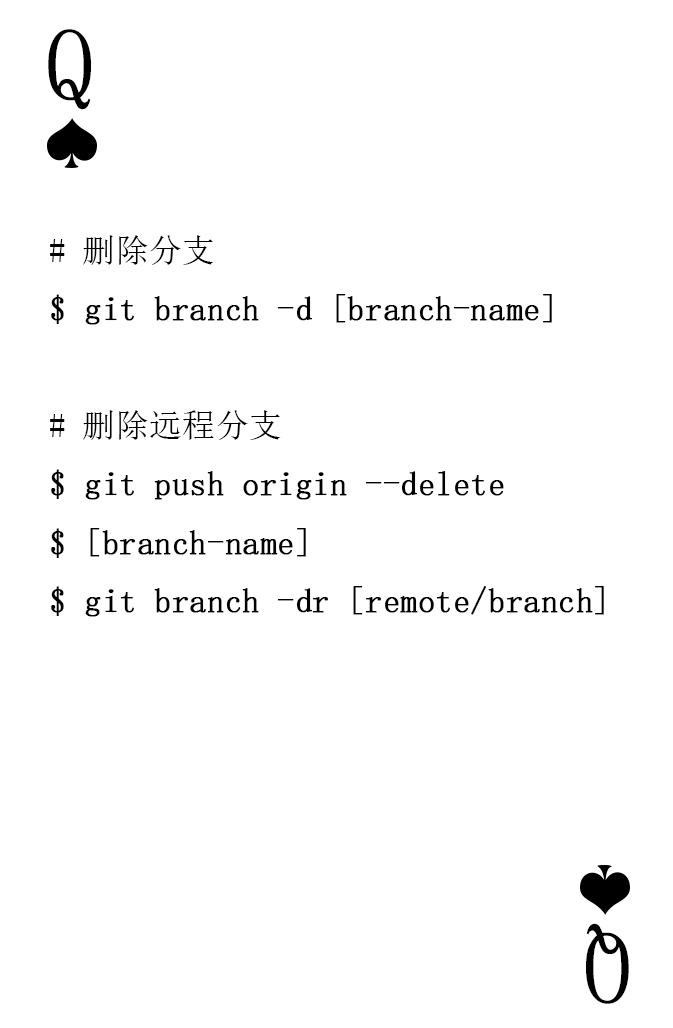
<style>
.page{position:relative;width:673px;height:1028px;background:#ffffff}
.page>*{position:absolute;margin:0}
.t1{font:104.2px "SimSun-ExtB";color:#010101;scale:0.93 1}
.t2{font:33.3px "SimSun";color:#000000;font-weight:bold}
.t3{font:33.3px "SimSun";color:#000000}
.t4{font:104.2px "SimSun-ExtB";letter-spacing:-0.14em;color:#010101;scale:0.93 1}
</style>
<div class="page">
<p class="t1" style="left:48px;top:29px;width:43px;height:81px">Q</p>
<p class="t2" style="left:50px;top:235px;width:554px;height:382px"><span class="t3"># 删除分支<br></span>$ git branch -d [branch-name]<br><span class="t3"><br># 删除远程分支<br></span>$ git push origin --delete<br>$ [branch-name]<br>$ git branch -dr [remote/branch]</p>
<p class="t4" style="left:586px;top:923px;width:43px;height:81px;rotate:180deg">Q</p>
</div>
